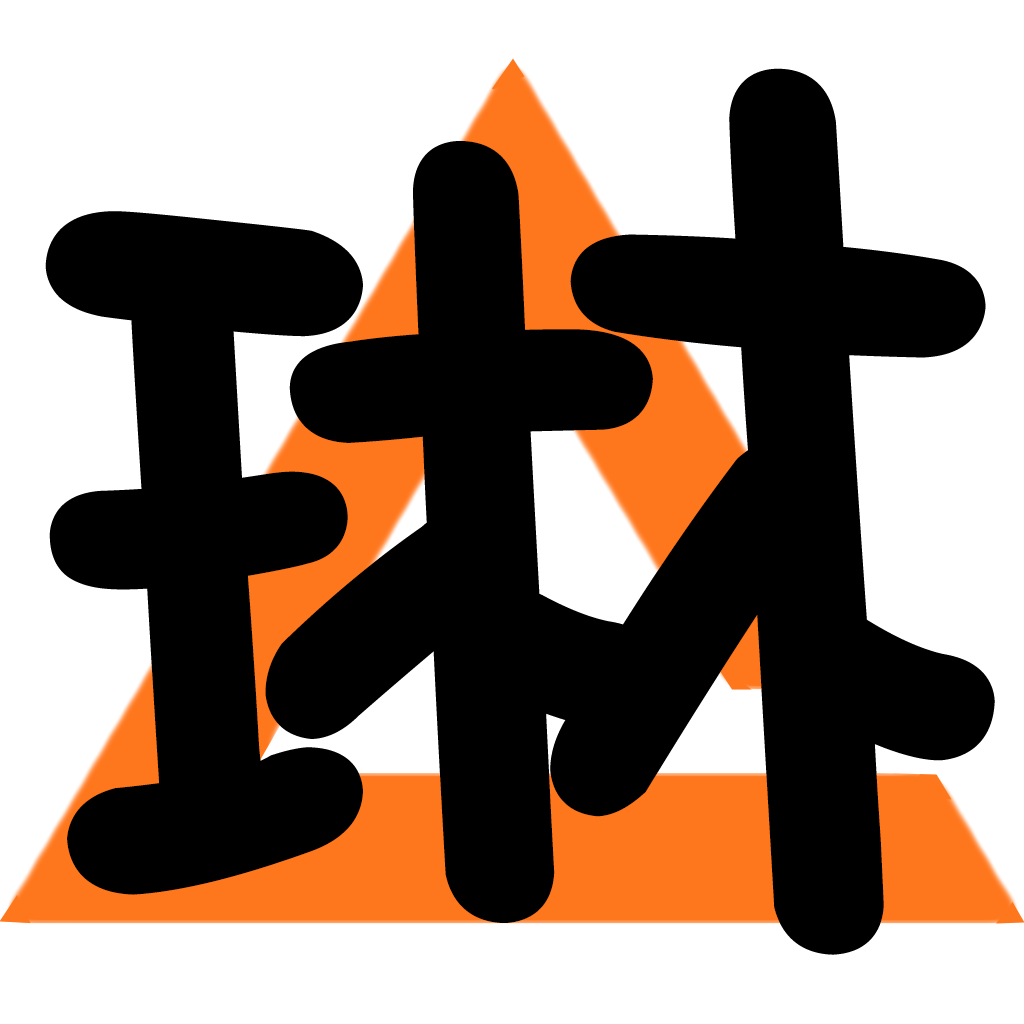
<style>
.page{position:relative;width:1024px;height:1024px;background:#ffffff}
.page>*{position:absolute;margin:0}
.t1{font:1041.7px "DFGirl-W5-WIN-BF";color:#000000;font-weight:bold}
</style>
<div class="page">
<p class="t1" style="left:45px;top:68px;width:950px;height:887px">琳</p>
</div>
